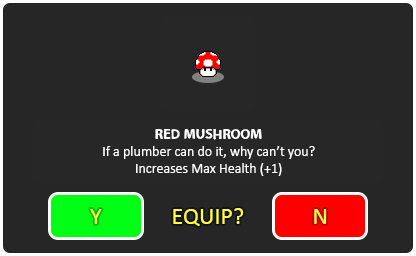
<style>
.page{position:relative;width:416px;height:256px;background:#262626}
.page>*{position:absolute;margin:0}
.t1{font:14px "Calibri";color:#ffffff}
.t2{font:14px "LooseySans";color:#ffffff}
.t3{font:24px "Calibri";color:#ffff40}
</style>
<div class="page">
<p class="t1" style="left:103px;top:129px;width:212px;height:47px;text-align:center"><span class="t2">RED MUSHROOM<br></span>If a plumber can do it, why can’t you?<br>Increases Max Health (+1)</p>
<p class="t3" style="left:90px;top:209px;width:12px;height:15px">Y</p>
<p class="t3" style="left:173px;top:208px;width:71px;height:18px">EQUIP?</p>
<p class="t3" style="left:314px;top:209px;width:13px;height:15px">N</p>
</div>
